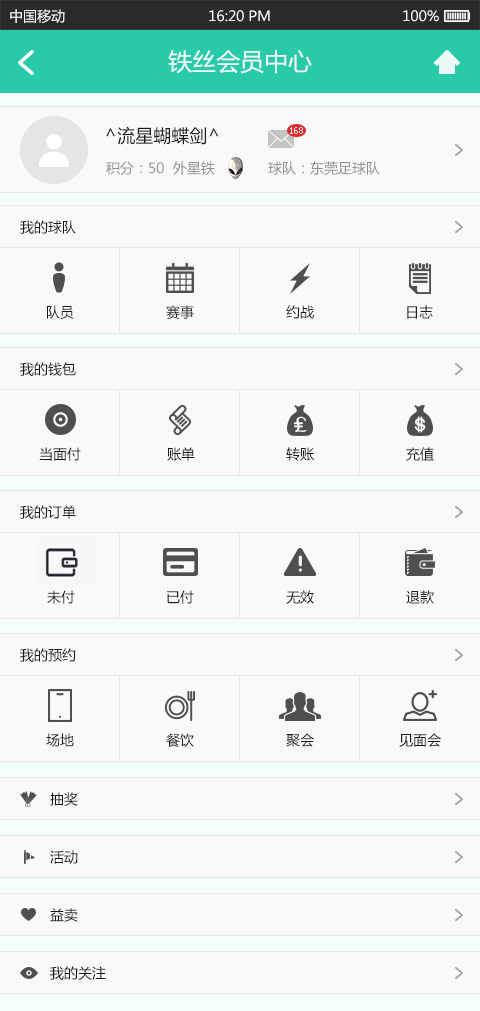
<style>
.page{position:relative;width:480px;height:1011px;background:#f9f9f9}
.page>*{position:absolute;margin:0}
.t1{font:14px "MicrosoftYaHei";color:#ffffff}
.t2{font:24px "MicrosoftYaHei";color:#f4fffd}
.t3{font:18px "MicrosoftYaHei";color:#191919}
.t4{font:9px "Tahoma";color:#f4fffd}
.t5{font:14px "MicrosoftYaHei";color:#909090}
.t6{font:14px "MicrosoftYaHei";color:#191919}
</style>
<div class="page">
<p class="t1" style="left:10px;top:9px;width:55px;height:14px">中国移动</p>
<p class="t1" style="left:209px;top:10px;width:61px;height:12px">16:20 PM</p>
<p class="t1" style="left:403px;top:10px;width:36px;height:12px">100%</p>
<p class="t2" style="left:168px;top:50px;width:144px;height:24px">铁丝会员中心</p>
<p class="t3" style="left:106px;top:126px;width:113px;height:19px">^流星蝴蝶剑^</p>
<p class="t4" style="left:290px;top:127px;width:13px;height:7px">168</p>
<p class="t5" style="left:106px;top:161px;width:109px;height:14px">积分：50  外星铁</p>
<p class="t5" style="left:268px;top:161px;width:112px;height:14px">球队：东莞足球队</p>
<p class="t6" style="left:20px;top:220px;width:56px;height:14px">我的球队</p>
<p class="t6" style="left:47px;top:305px;width:27px;height:14px">队员</p>
<p class="t6" style="left:166px;top:305px;width:28px;height:14px">赛事</p>
<p class="t6" style="left:286px;top:305px;width:28px;height:14px">约战</p>
<p class="t6" style="left:407px;top:305px;width:26px;height:14px">日志</p>
<p class="t6" style="left:20px;top:362px;width:56px;height:14px">我的钱包</p>
<p class="t6" style="left:39px;top:447px;width:42px;height:14px">当面付</p>
<p class="t6" style="left:167px;top:447px;width:28px;height:14px">账单</p>
<p class="t6" style="left:286px;top:447px;width:29px;height:14px">转账</p>
<p class="t6" style="left:406px;top:447px;width:28px;height:14px">充值</p>
<p class="t6" style="left:20px;top:505px;width:56px;height:14px">我的订单</p>
<p class="t6" style="left:47px;top:590px;width:28px;height:14px">未付</p>
<p class="t6" style="left:167px;top:590px;width:27px;height:14px">已付</p>
<p class="t6" style="left:286px;top:590px;width:28px;height:14px">无效</p>
<p class="t6" style="left:406px;top:590px;width:28px;height:14px">退款</p>
<p class="t6" style="left:20px;top:648px;width:56px;height:14px">我的预约</p>
<p class="t6" style="left:46px;top:733px;width:28px;height:14px">场地</p>
<p class="t6" style="left:166px;top:733px;width:28px;height:14px">餐饮</p>
<p class="t6" style="left:286px;top:733px;width:28px;height:14px">聚会</p>
<p class="t6" style="left:399px;top:733px;width:42px;height:14px">见面会</p>
<p class="t6" style="left:50px;top:792px;width:28px;height:14px">抽奖</p>
<p class="t6" style="left:50px;top:850px;width:28px;height:14px">活动</p>
<p class="t6" style="left:50px;top:908px;width:28px;height:14px">益卖</p>
<p class="t6" style="left:50px;top:966px;width:56px;height:14px">我的关注</p>
</div>
